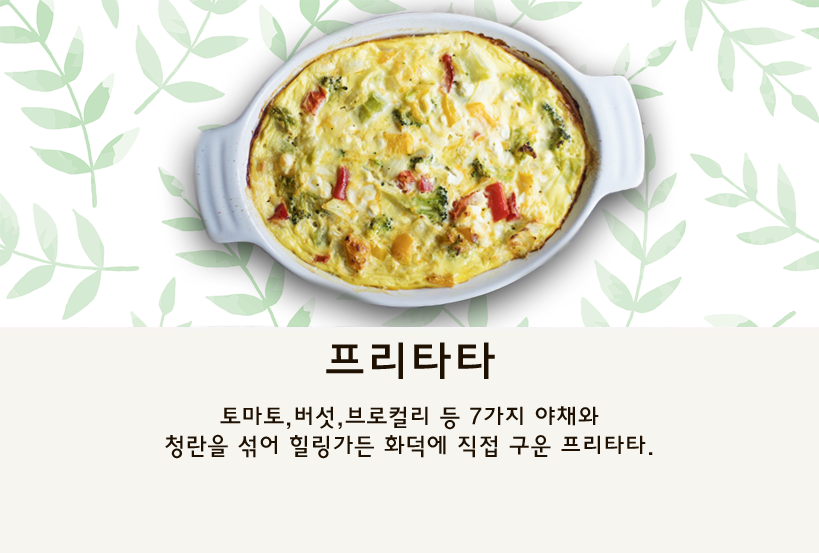
<style>
.page{position:relative;width:819px;height:553px;background:#f6f5f0}
.page>*{position:absolute;margin:0}
.t1{font:24px "HaanYGodic23";color:#1f1102}
.t2{font:48px "HaanYGodic23";color:#1f1102}
</style>
<div class="page">
<p class="t1" style="left:165px;top:342px;width:488px;height:117px;text-align:center"><span class="t2">프리타타<br></span><br><br>토마토,버섯,브로컬리 등 7가지 야채와 <br>청란을 섞어 힐링가든 화덕에 직접 구운 프리타타.</p>
</div>
